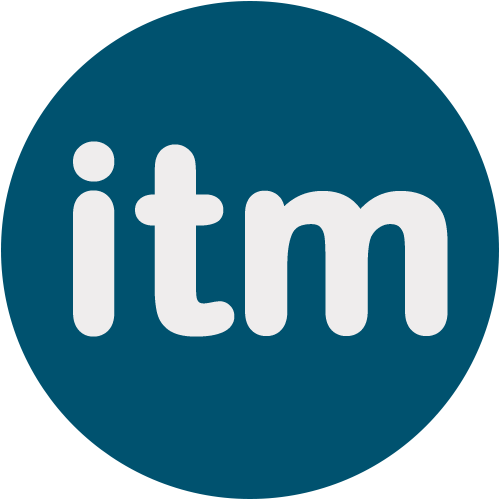
<style>
.page{position:relative;width:500px;height:500px;background:#00526f}
.page>*{position:absolute;margin:0}
.t1{font:256.3px "ArialRoundedMTBold";color:#efeded;font-weight:bold}
</style>
<div class="page">
<p class="t1" style="left:73px;top:141px;width:375px;height:196px">itm</p>
</div>
